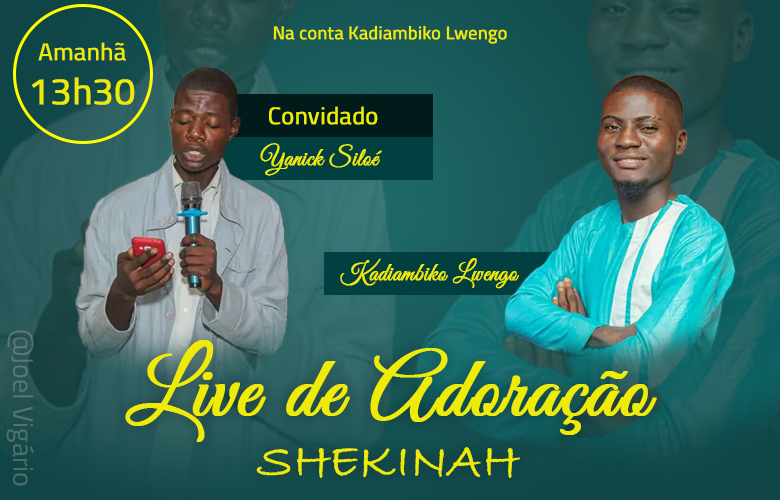
<style>
.page{position:relative;width:780px;height:500px}
.page>*{position:absolute;margin:0}
.t1{font:18px "TitilliumWeb-Regular";color:#eeeb07;font-weight:bold}
.t2{font:24px "TitilliumWeb-Regular";color:#eeeb07;font-weight:bold}
.t3{font:37px "TitilliumWeb-Regular";color:#eeeb07;font-weight:bold}
.t4{font:24px "GreatVibes-Regular";color:#eeeb07;font-weight:bold}
.t5{font:28px "TitilliumWeb-Regular";color:#557272}
.t6{font:88px "GreatVibes-Regular";color:#eeeb07;font-weight:bold}
.t7{font:48px "BradleyHandITC";color:#eeeb07;font-weight:bold}
</style>
<div class="page">
<p class="t1" style="left:273px;top:25px;width:234px;height:19px">Na conta Kadiambiko Lwengo</p>
<p class="t2" style="left:32px;top:42px;width:103px;height:63px;text-align:center">Amanhã<br><span class="t3">13h30</span></p>
<p class="t2" style="left:269px;top:106px;width:109px;height:19px">Convidado</p>
<p class="t4" style="left:260px;top:143px;width:122px;height:33px">Yanick Siloé</p>
<p class="t4" style="left:340px;top:258px;width:179px;height:31px">Kadiambiko Lwengo</p>
<p class="t5" style="left:6px;top:330px;width:28px;height:156px;rotate:90deg">@Joel Vigário</p>
<p class="t6" style="left:125px;top:340px;width:532px;height:138px;text-align:center">Live de Adoração<br><span class="t7">SHEKINAH</span></p>
</div>
